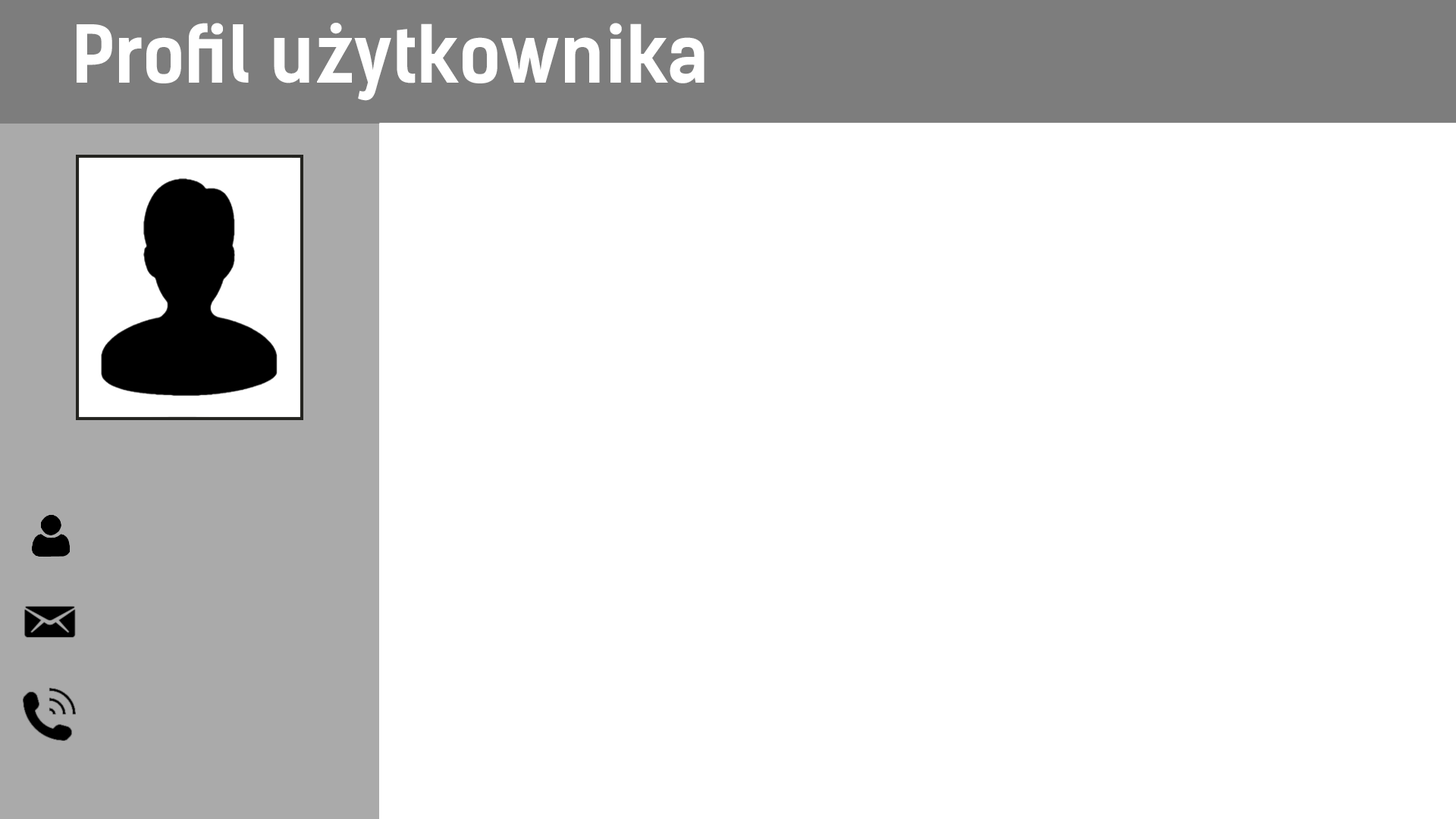
<style>
.page{position:relative;width:1456px;height:819px;background:#ffffff}
.page>*{position:absolute;margin:0}
.t1{font:75.8px "KelsonSansBG-Bold";color:#ffffff}
</style>
<div class="page">
<p class="t1" style="left:77px;top:23px;width:627px;height:78px">Profil użytkownika</p>
</div>
